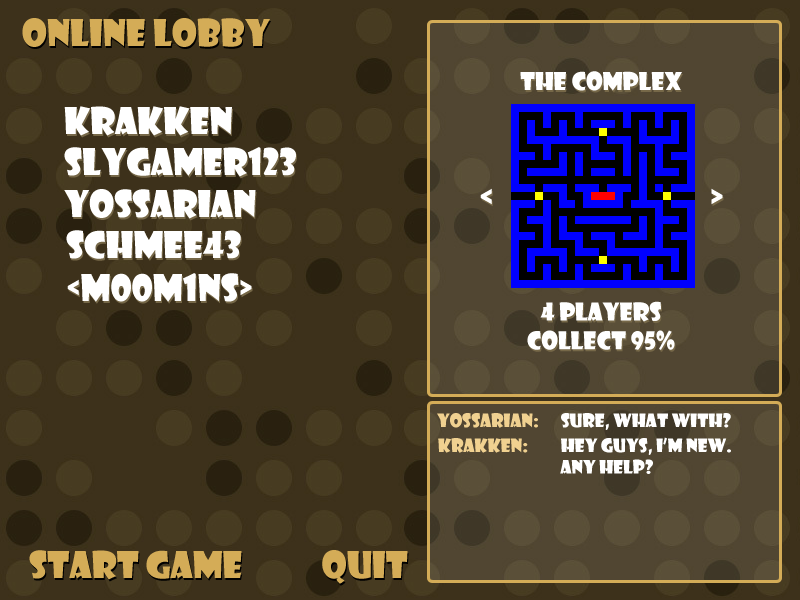
<style>
.page{position:relative;width:800px;height:600px;background:#3d311b}
.page>*{position:absolute;margin:0}
.t1{font:36px "ShowcardGothic-Reg";color:#d4ac57}
.t2{font:24px "ShowcardGothic-Reg";color:#ffffff}
.t3{font:36px "ShowcardGothic-Reg";color:#ffffff}
.t4{font:18px "ShowcardGothic-Reg";color:#ffffff}
.t5{font:18px "ShowcardGothic-Reg";color:#f0d190}
</style>
<div class="page">
<p class="t1" style="left:22px;top:18px;width:248px;height:29px">ONLINE Lobby</p>
<p class="t2" style="left:520px;top:71px;width:162px;height:279px;text-align:center">the complex<br><br><br><br><br><br><br><br>4 players<br>collect 95%</p>
<p class="t3" style="left:64px;top:106px;width:168px;height:30px">Krakken</p>
<p class="t3" style="left:64px;top:147px;width:232px;height:30px">SlyGamer123</p>
<p class="t3" style="left:64px;top:189px;width:192px;height:30px">Yossarian</p>
<p class="t3" style="left:480px;top:188px;width:243px;height:17px">&lt;                              &gt;</p>
<p class="t3" style="left:66px;top:230px;width:175px;height:29px">Schmee43</p>
<p class="t3" style="left:67px;top:273px;width:185px;height:29px">&lt;M00M1NS&gt;</p>
<p class="t4" style="left:437px;top:413px;width:294px;height:17px"><span class="t5">yossarian:</span>      sure, what with?</p>
<p class="t4" style="left:438px;top:437px;width:293px;height:37px"><span class="t5">krakken:</span>         hey guys, i’m new.<br>       any help?</p>
<p class="t1" style="left:29px;top:550px;width:379px;height:34px">START GAME           Quit</p>
</div>
